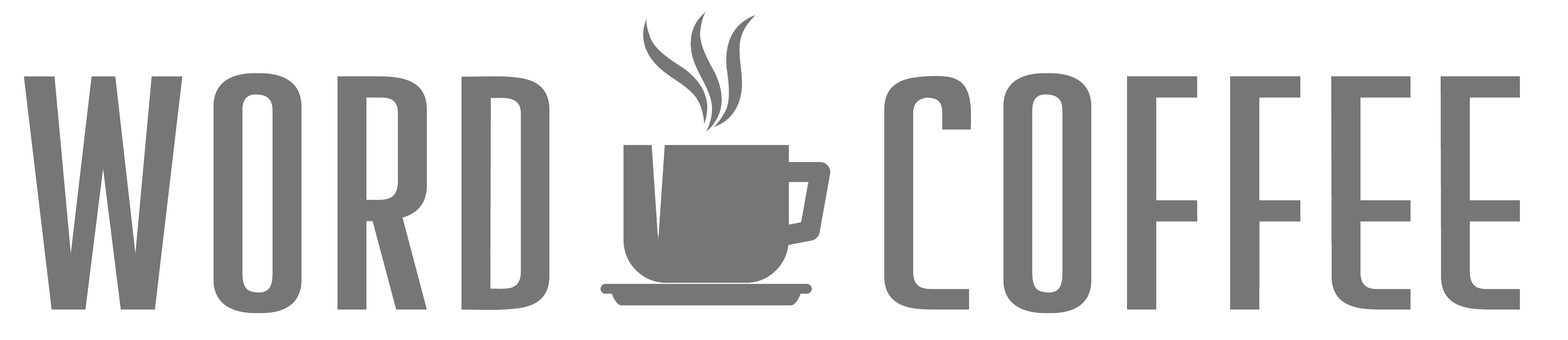
<style>
.page{position:relative;width:1568px;height:340px;background:#ffffff}
.page>*{position:absolute;margin:0}
.t1{font:347.3px "CreatorCreditsBB";color:#767676}
</style>
<div class="page">
<p class="t1" style="left:24px;top:73px;width:525px;height:241px">WORD</p>
<p class="t1" style="left:884px;top:73px;width:636px;height:241px">COFFEE</p>
</div>
